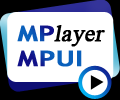
<style>
.page{position:relative;width:120px;height:100px;background:#ffffff}
.page>*{position:absolute;margin:0}
.t1{font:21.6px "TrebuchetMS-Bold";font-weight:bold;scale:1.28 1}
.t2{font:23px "TimesNewRomanPSMT";color:#000000;font-weight:bold;font-style:italic}
</style>
<div class="page">
<p class="t1" style="left:17px;top:25px;width:37px;height:17px">MP</p>
<p class="t2" style="left:54px;top:25px;width:51px;height:22px">layer</p>
<p class="t1" style="left:17px;top:50px;width:65px;height:17px">MPUI</p>
</div>
